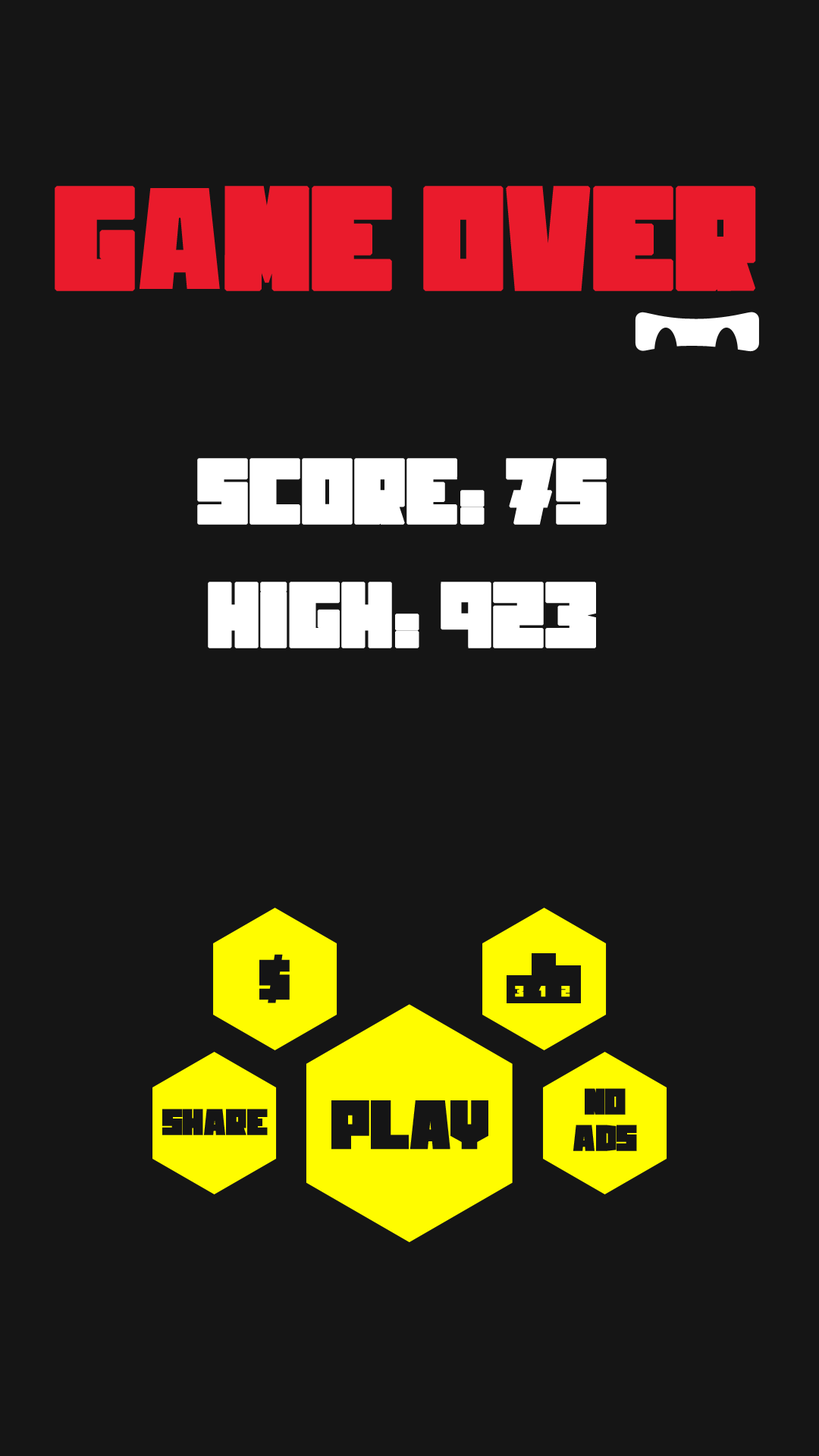
<style>
.page{position:relative;width:819px;height:1456px;background:#151515}
.page>*{position:absolute;margin:0}
.t1{font:144.1px "KING&ROOSTER";color:#ea1b2c;text-transform:uppercase;font-weight:bold}
.t2{font:91px "KING&ROOSTER";color:#ffffff;text-transform:uppercase;font-weight:bold}
.t3{font:83.4px "KING&ROOSTER";color:#151515}
.t4{font:15.2px "KING&ROOSTER";color:#fffc00;text-transform:uppercase;font-weight:bold}
.t5{font:36.4px/36.4px "KING&ROOSTER";color:#151515;text-transform:uppercase;font-weight:bold}
.t6{font:36.4px "KING&ROOSTER";color:#151515;text-transform:uppercase;font-weight:bold}
.t7{font:68.2px "KING&ROOSTER";color:#151515;text-transform:uppercase;font-weight:bold}
</style>
<div class="page">
<p class="t1" style="left:55px;top:186px;width:701px;height:105px">GAME OVER</p>
<p class="t2" style="left:197px;top:458px;width:410px;height:67px">SCORE: 75</p>
<p class="t2" style="left:208px;top:582px;width:388px;height:66px">HIGH: 923</p>
<p class="t3" style="left:259px;top:954px;width:31px;height:49px">$</p>
<p class="t4" style="left:515px;top:986px;width:9px;height:11px">3</p>
<p class="t4" style="left:538px;top:986px;width:8px;height:11px">1</p>
<p class="t4" style="left:561px;top:986px;width:9px;height:11px">2</p>
<p class="t5" style="left:573px;top:1088px;width:64px;height:63px;text-align:center">NO<br>ADS</p>
<p class="t6" style="left:162px;top:1109px;width:106px;height:26px">Share</p>
<p class="t7" style="left:331px;top:1100px;width:157px;height:50px">PLAY</p>
</div>
